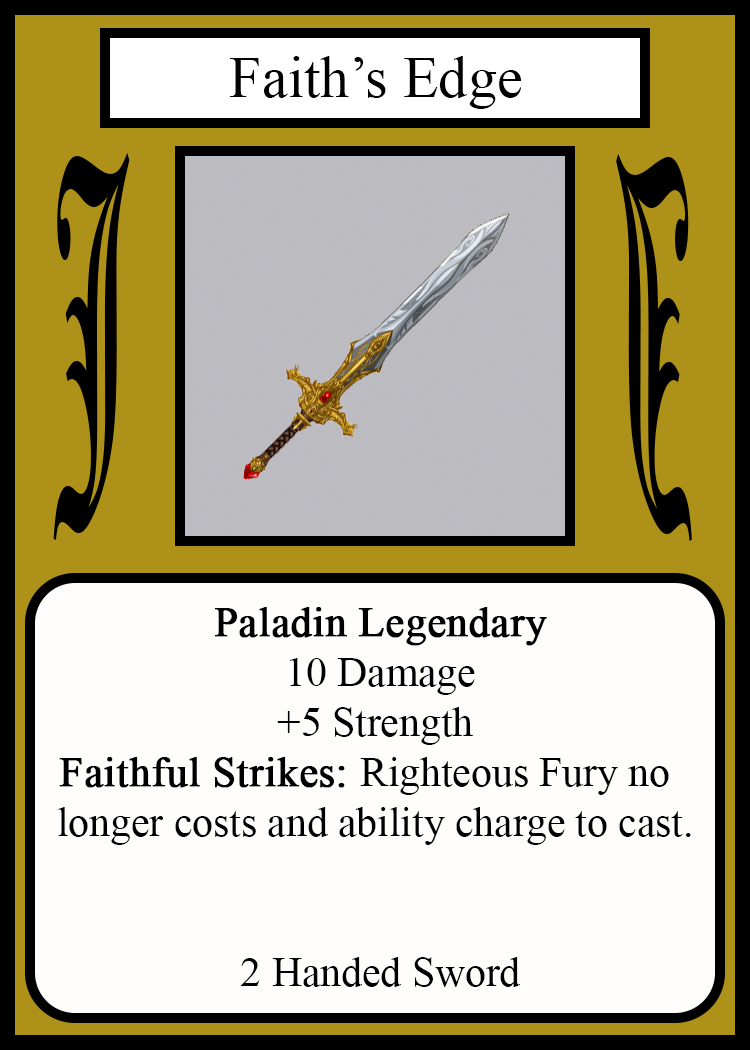
<style>
.page{position:relative;width:750px;height:1050px;background:#fffcfc}
.page>*{position:absolute;margin:0}
.t1{font:58.3px "TimesNewRomanPSMT";color:#010101}
.t2{font:450.1px "OldEnglishTextMT";color:#000000;scale:0.26 1}
.t3{font:449.7px "OldEnglishTextMT";color:#000000;scale:0.26 1}
.t4{font:41.7px "TimesNewRomanPSMT";color:#000000}
.t5{font:41.7px "TimesNewRomanPSMT";color:#000000;font-weight:bold}
</style>
<div class="page">
<p class="t1" style="left:229px;top:56px;width:293px;height:53px">Faith’s Edge</p>
<p class="t2" style="left:53px;top:153px;width:77px;height:387px">J</p>
<p class="t3" style="left:616px;top:154px;width:76px;height:387px;rotate:180deg">J</p>
<p class="t4" style="left:58px;top:607px;width:633px;height:380px;text-align:center"><span class="t5">Paladin Legendary<br></span> 10 Damage<br>+5 Strength<br><span class="t5">Faithful Strikes: </span>Righteous Fury no  <br>longer costs and ability charge to cast.<br><br><br> 2 Handed Sword</p>
</div>
